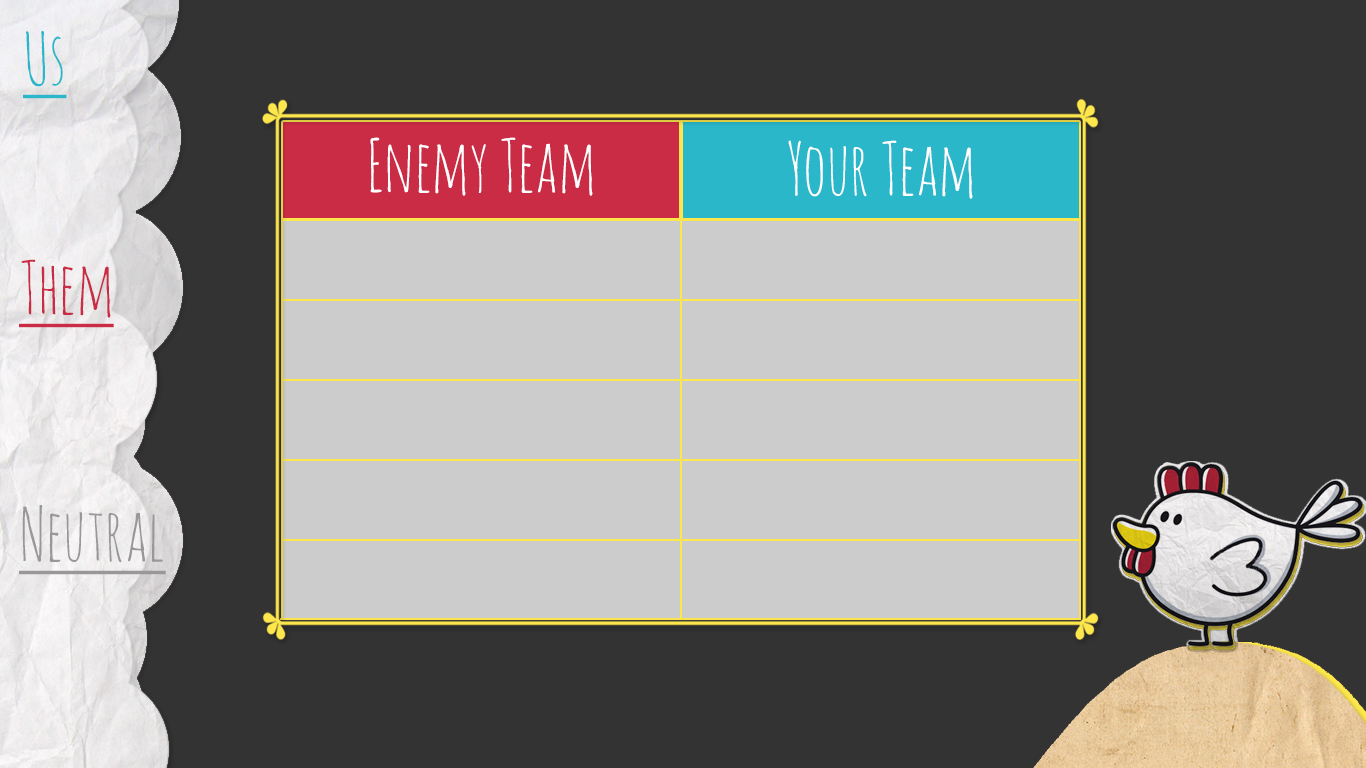
<style>
.page{position:relative;width:1366px;height:768px;background:#333333}
.page>*{position:absolute;margin:0}
.t1{font:72px "AmaticSC-Regular";color:#2ab7ca;text-decoration:underline}
.t2{font:72px "AmaticSC-Regular";color:#ffffff}
.t3{font:72px "AmaticSC-Regular";color:#cb2c45;text-decoration:underline}
.t4{font:72px "AmaticSC-Regular";color:#999798;text-decoration:underline}
</style>
<div class="page">
<p class="t1" style="left:23px;top:30px;width:44px;height:69px">Us</p>
<p class="t2" style="left:370px;top:137px;width:223px;height:59px">Enemy Team</p>
<p class="t2" style="left:788px;top:140px;width:185px;height:59px">Your Team</p>
<p class="t3" style="left:19px;top:259px;width:95px;height:69px">Them</p>
<p class="t4" style="left:19px;top:505px;width:147px;height:70px">Neutral</p>
</div>
